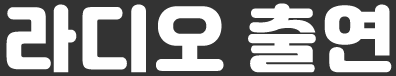
<style>
.page{position:relative;width:396px;height:76px;background:#333333}
.page>*{position:absolute;margin:0}
.t1{font:72px "Jalnan";letter-spacing:0.05em;color:#ffffff;text-transform:uppercase}
</style>
<div class="page">
<p class="t1" style="left:6px;top:3px;width:386px;height:70px">라디오 출연</p>
</div>
